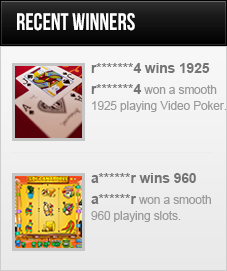
<style>
.page{position:relative;width:227px;height:271px}
.page>*{position:absolute;margin:0}
.t1{font:23.8px "BebasNeue";color:#ffffff;scale:0.96 1}
.t2{font:13.7px "Arial-BoldMT";color:#747474}
.t3{font:11.7px/16px "ArialMT";color:#999999}
.t4{font:13.7px/16px "Arial-BoldMT";color:#747474}
</style>
<div class="page">
<p class="t1" style="left:17px;top:13px;width:118px;height:18px">Recent Winners</p>
<p class="t2" style="left:91px;top:63px;width:119px;height:10px">r*******4 wins 1925</p>
<p class="t3" style="left:91px;top:84px;width:136px;height:28px"><span class="t4">r*******4</span> won a smooth <br>1925 playing Video Poker.</p>
<p class="t2" style="left:91px;top:173px;width:105px;height:10px">a******r wins 960</p>
<p class="t3" style="left:91px;top:194px;width:120px;height:28px"><span class="t4">a******r</span> won a smooth <br>960 playing slots.</p>
</div>
